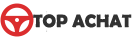
<style>
.page{position:relative;width:132px;height:40px;background:#ffffff}
.page>*{position:absolute;margin:0}
.t1{font:18px "BerlinSansFBDemi-Bold";color:#323232}
</style>
<div class="page">
<p class="t1" style="left:33px;top:14px;width:99px;height:14px">TOP ACHAT</p>
</div>
